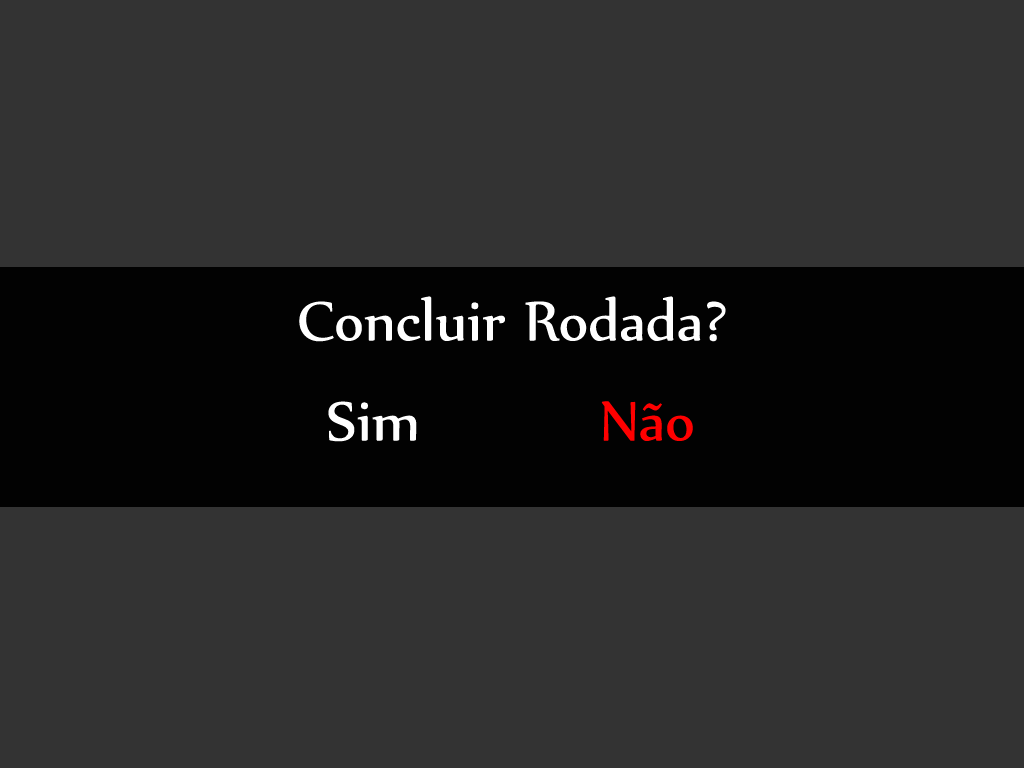
<style>
.page{position:relative;width:1024px;height:768px;background:#333333}
.page>*{position:absolute;margin:0}
.t1{font:66.7px "Nyala-Regular";color:#ffffff}
.t2{font:66.7px "Nyala-Regular";color:#ff0000}
</style>
<div class="page">
<p class="t1" style="left:299px;top:296px;width:427px;height:46px">Concluir Rodada?</p>
<p class="t1" style="left:328px;top:401px;width:89px;height:41px">Sim</p>
<p class="t2" style="left:601px;top:401px;width:92px;height:40px">Não</p>
</div>
